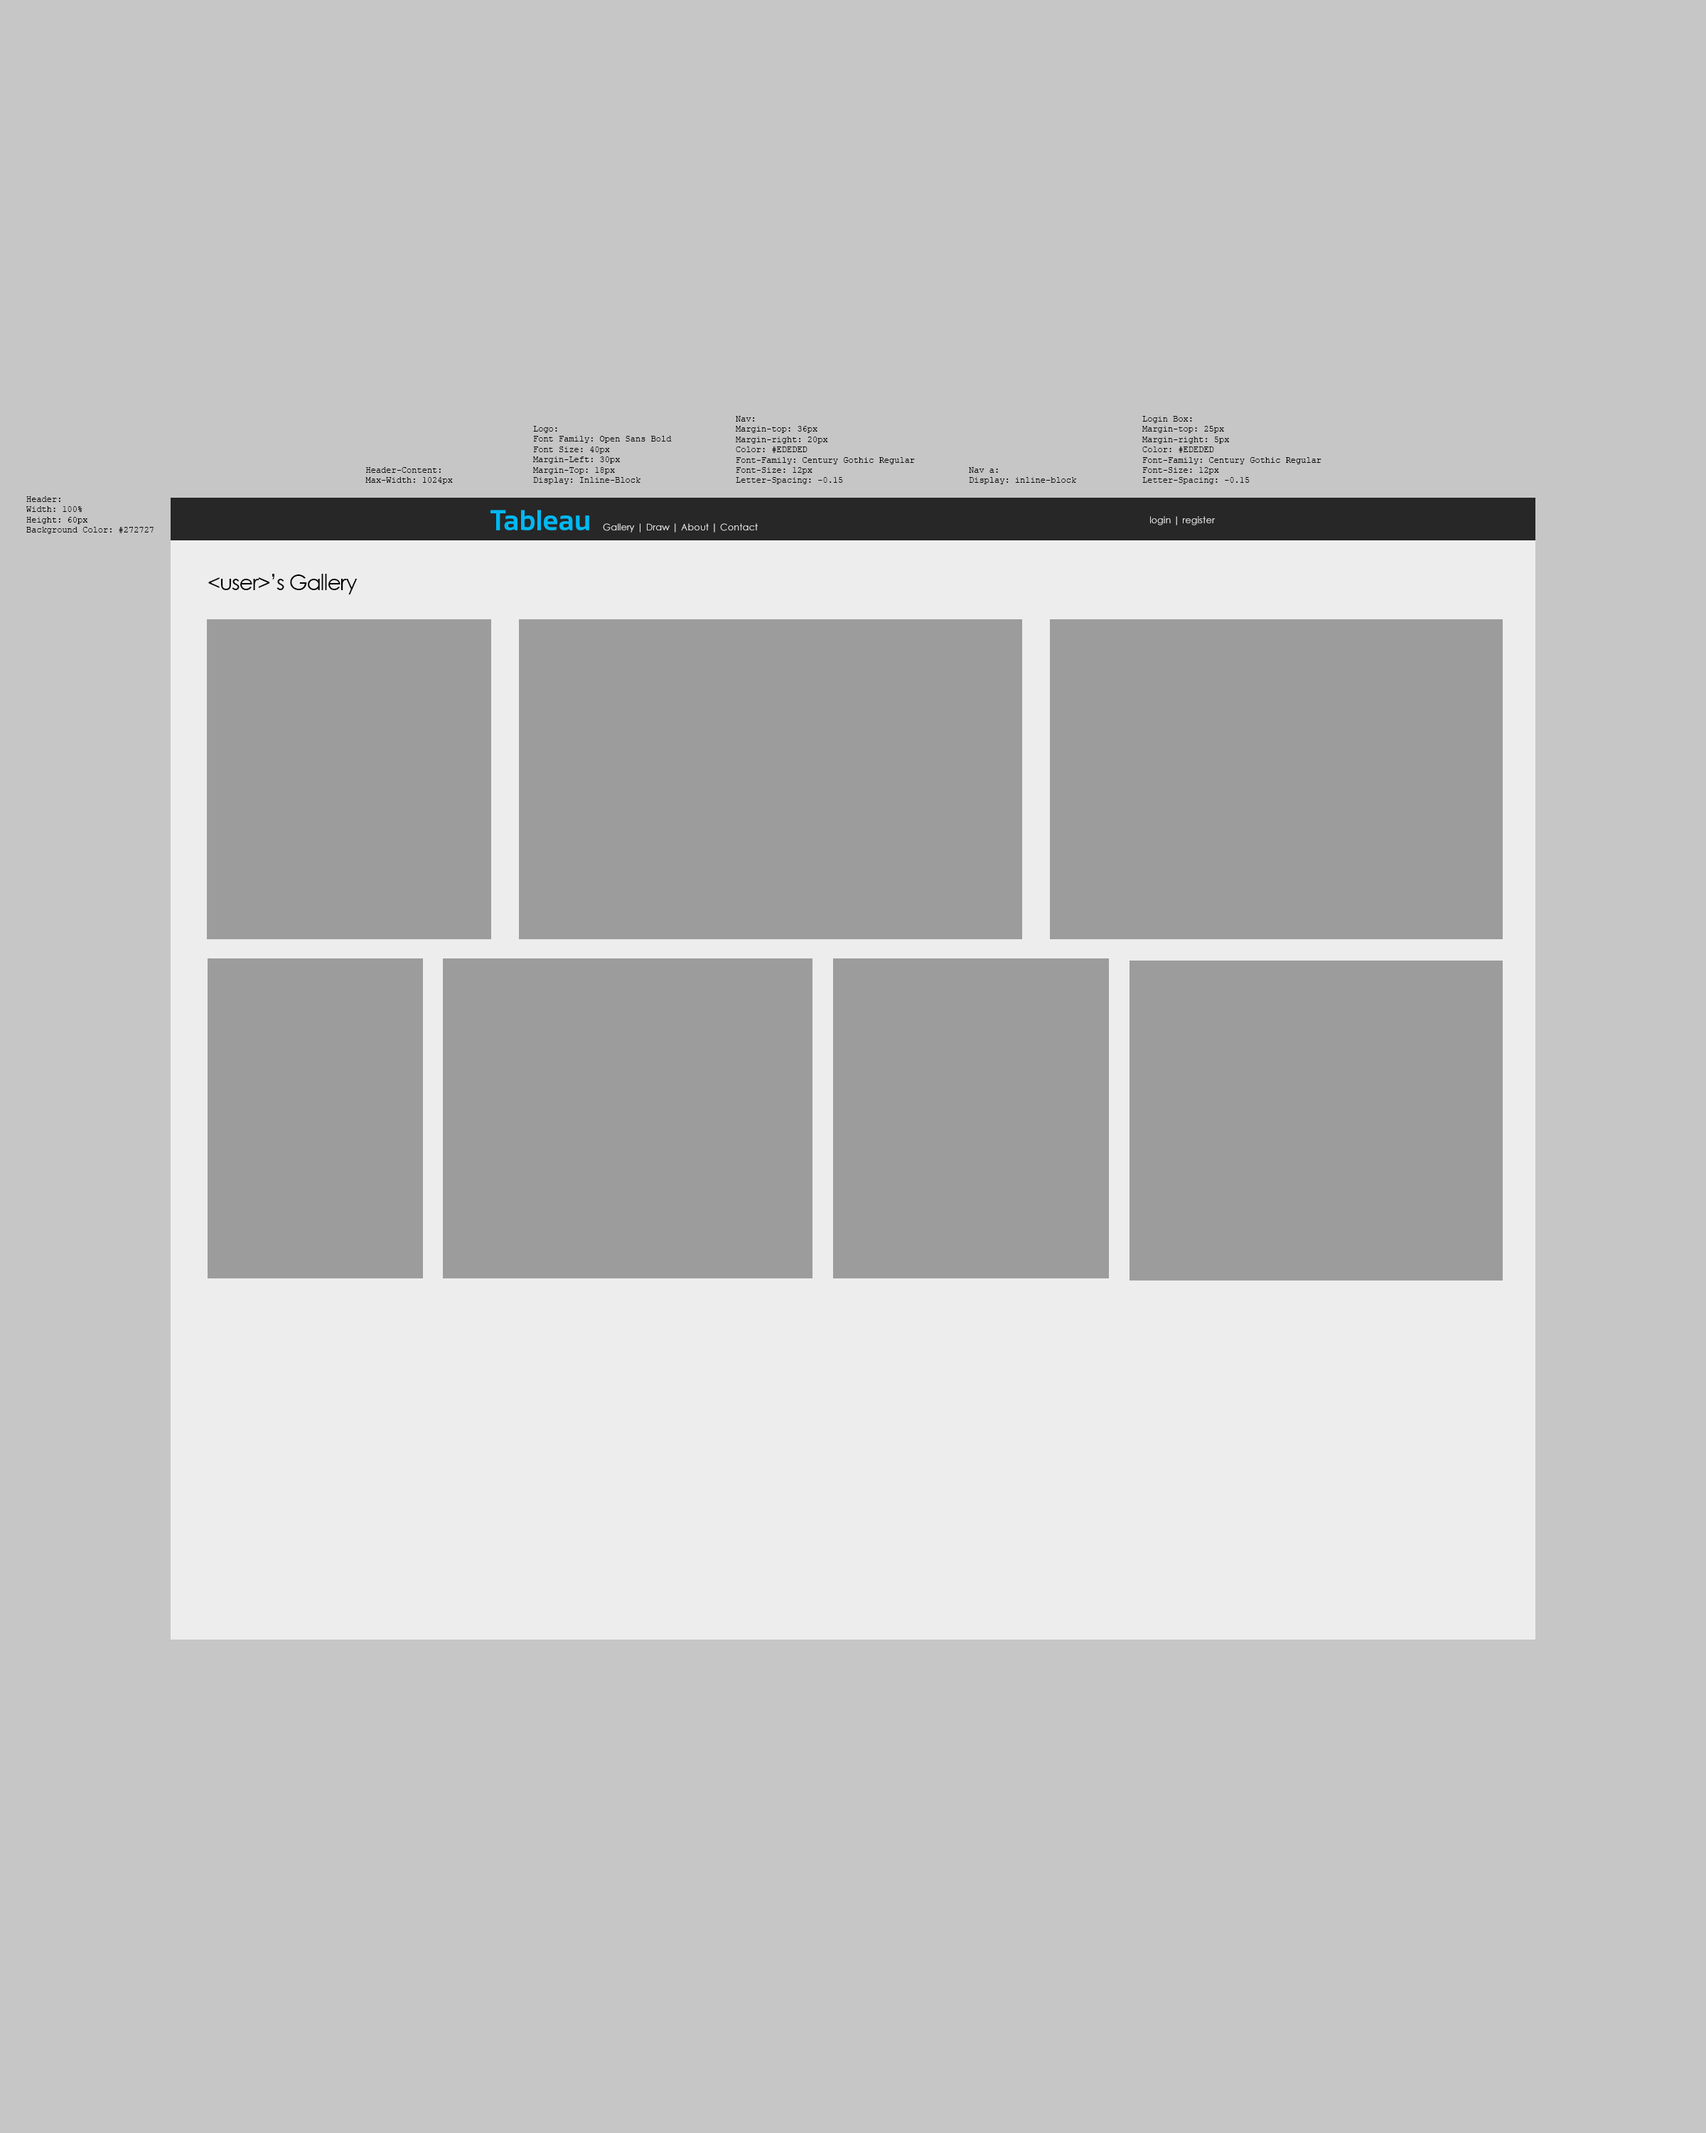
<style>
.page{position:relative;width:1706px;height:2133px;background:#c6c6c6}
.page>*{position:absolute;margin:0}
.t1{font:8.5px "CourierNewPSMT";color:#000000}
.t2{font:28.8px "Sansation-Bold";color:#00b9f2}
.t3{font:9.2px "CenturyGothic";color:#ededed}
.t4{font:21.3px "CenturyGothic";letter-spacing:-0.04em;color:#000000}
</style>
<div class="page">
<p class="t1" style="left:533px;top:426px;width:139px;height:58px">Logo:<br>Font Family: Open Sans Bold<br>Font Size: 40px<br>Margin-Left: 30px<br>Margin-Top: 18px<br>Display: Inline-Block</p>
<p class="t1" style="left:736px;top:416px;width:179px;height:68px">Nav:<br>Margin-top: 36px<br>Margin-right: 20px<br>Color: #EDEDED<br>Font-Family: Century Gothic Regular<br>Font-Size: 12px<br>Letter-Spacing: -0.15</p>
<p class="t1" style="left:1142px;top:416px;width:179px;height:68px">Login Box:<br>Margin-top: 25px<br>Margin-right: 5px<br>Color: #EDEDED<br>Font-Family: Century Gothic Regular<br>Font-Size: 12px<br>Letter-Spacing: -0.15</p>
<p class="t1" style="left:365px;top:467px;width:88px;height:17px">Header-Content:<br>Max-Width: 1024px</p>
<p class="t1" style="left:969px;top:467px;width:108px;height:17px">Nav a:<br>Display: inline-block</p>
<p class="t1" style="left:26px;top:496px;width:128px;height:38px">Header:<br>Width: 100%<br>Height: 60px<br>Background Color: #272727</p>
<p class="t2" style="left:490px;top:510px;width:99px;height:20px">Tableau</p>
<p class="t3" style="left:1150px;top:516px;width:66px;height:9px">login | register</p>
<p class="t3" style="left:603px;top:523px;width:155px;height:9px">Gallery | Draw | About | Contact</p>
<p class="t4" style="left:208px;top:574px;width:150px;height:20px">&lt;user&gt;’s Gallery</p>
</div>
